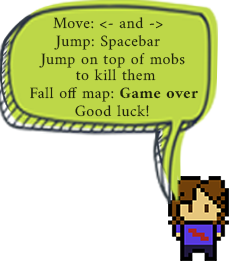
<style>
.page{position:relative;width:229px;height:261px;background:#ffffff}
.page>*{position:absolute;margin:0}
.t1{font:16px "Amiri-Regular";letter-spacing:0.03em;color:#1f230c}
.t2{font:16px/4px "Amiri-Regular";letter-spacing:0.03em;color:#1f230c}
.t3{font:16px "Amiri-Bold";letter-spacing:0.03em;color:#1f230c}
</style>
<div class="page">
<p class="t1" style="left:53px;top:17px;width:110px;height:12px">Move: &lt;- and -&gt;</p>
<p class="t1" style="left:54px;top:35px;width:106px;height:15px">Jump: Spacebar</p>
<p class="t2" style="left:39px;top:52px;width:146px;height:29px;text-align:center">Jump on top of mobs <br><br><br><br>to kill them</p>
<p class="t1" style="left:30px;top:87px;width:168px;height:15px">Fall off map: <span class="t3">Game over</span></p>
<p class="t1" style="left:75px;top:105px;width:74px;height:12px">Good luck!</p>
</div>
